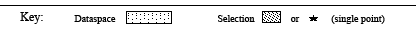
<style>
.page{position:relative;width:416px;height:29px;background:#ffffff}
.page>*{position:absolute;margin:0}
.t1{font:12px "TimesNewRomanPSMT";color:#000000}
.t2{font:10px "TimesNewRomanPSMT";color:#000000}
</style>
<div class="page">
<p class="t1" style="left:20px;top:12px;width:23px;height:12px">Key:</p>
<p class="t2" style="left:74px;top:15px;width:42px;height:9px">Dataspace</p>
<p class="t2" style="left:218px;top:15px;width:37px;height:7px">Selection</p>
<p class="t2" style="left:290px;top:17px;width:10px;height:5px">or</p>
<p class="t2" style="left:331px;top:15px;width:54px;height:9px">(single point)</p>
</div>
